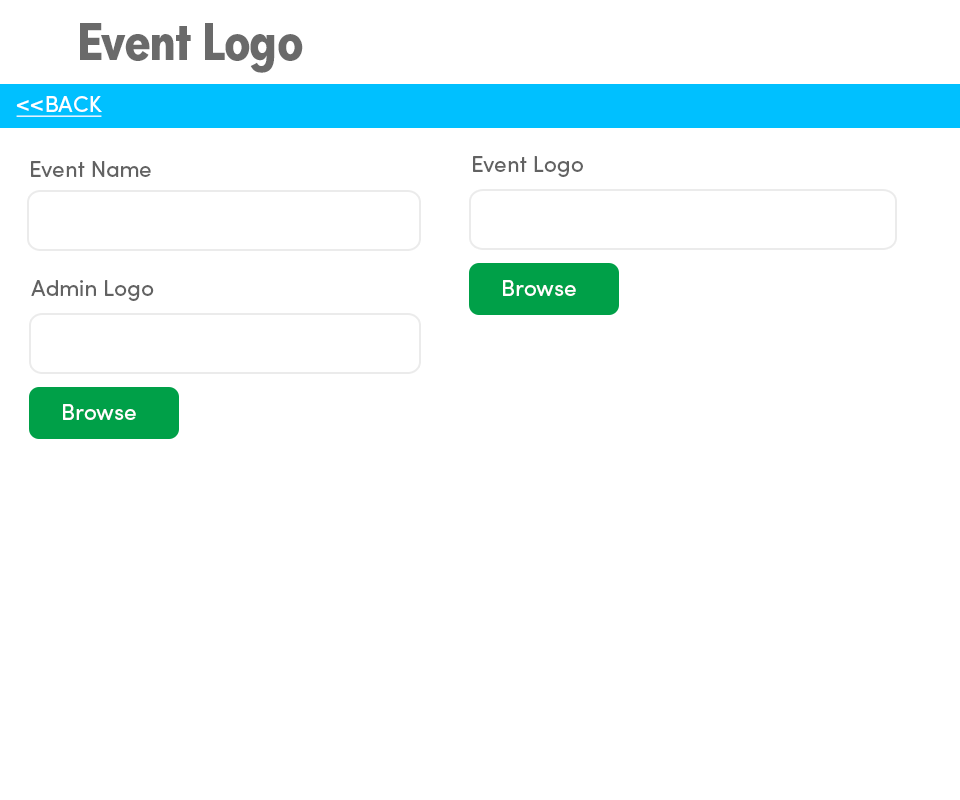
<style>
.page{position:relative;width:960px;height:800px;background:#ffffff}
.page>*{position:absolute;margin:0}
.t1{font:54.2px "SofiaProBoldCondensed";letter-spacing:-0.02em;color:#6a6a6a}
.t2{font:22.6px "SofiaProRegular";color:#ffffff;text-decoration:underline}
.t3{font:22.6px "SofiaProRegular";color:#626262}
.t4{font:22.6px "SofiaProRegular";color:#ffffff}
</style>
<div class="page">
<p class="t1" style="left:80px;top:23px;width:223px;height:50px">Event Logo</p>
<p class="t2" style="left:16px;top:96px;width:86px;height:21px">&lt;&lt;BACK</p>
<p class="t3" style="left:31px;top:161px;width:120px;height:16px">Event Name</p>
<p class="t3" style="left:473px;top:156px;width:110px;height:21px">Event Logo</p>
<p class="t3" style="left:31px;top:280px;width:123px;height:21px">Admin Logo</p>
<p class="t4" style="left:503px;top:280px;width:73px;height:16px">Browse</p>
<p class="t4" style="left:63px;top:404px;width:73px;height:16px">Browse</p>
</div>
